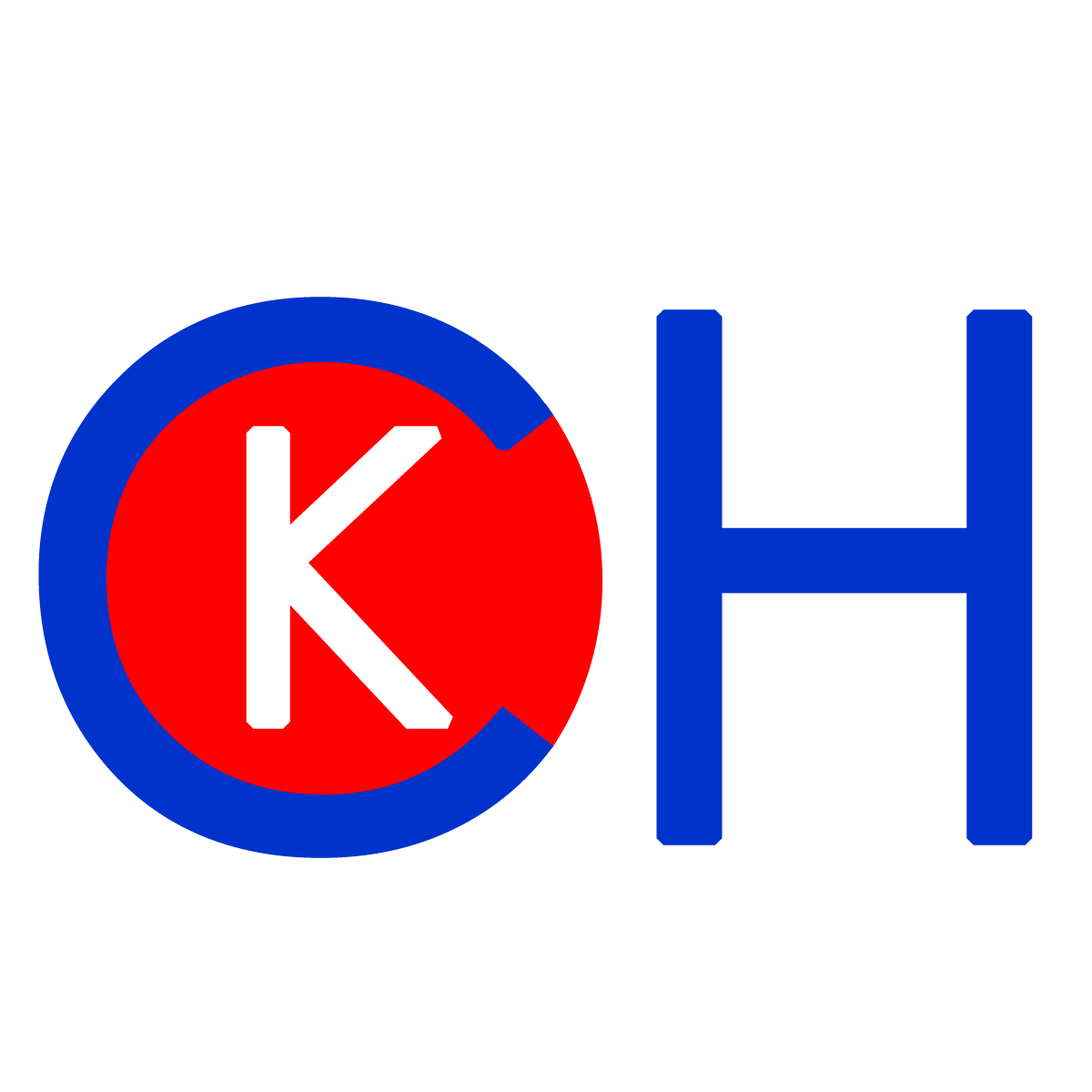
<style>
.page{position:relative;width:1092px;height:1092px;background:#ffffff}
.page>*{position:absolute;margin:0}
.t1{font:726.4px "CenturyGothic";color:#0033cc;font-weight:bold}
.t2{font:400.9px "CenturyGothic";color:#ffffff;font-weight:bold}
</style>
<div class="page">
<p class="t1" style="left:38px;top:297px;width:995px;height:561px">CH</p>
<p class="t2" style="left:246px;top:426px;width:207px;height:303px">K</p>
</div>
